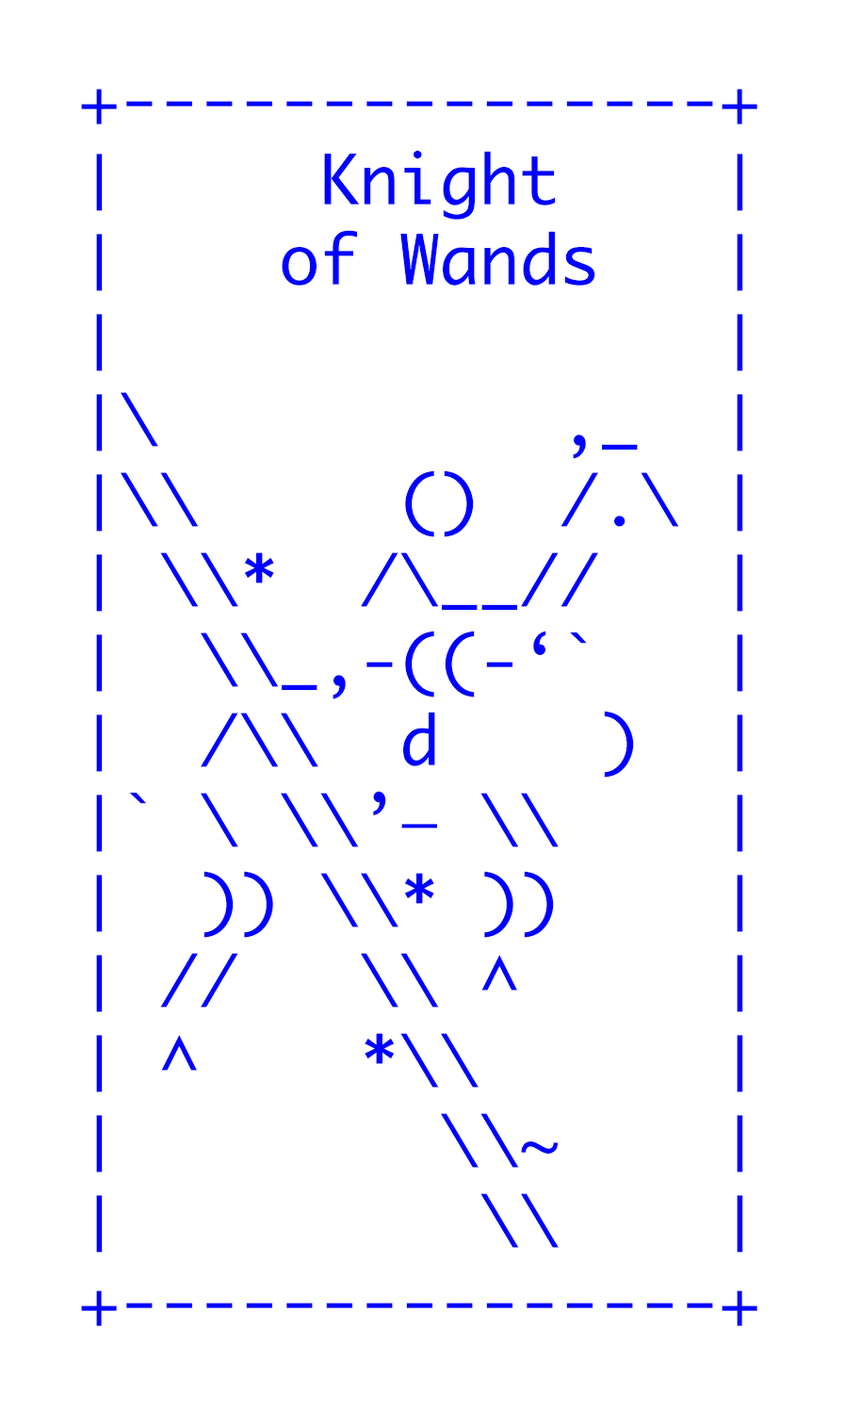
<style>
.page{position:relative;width:845px;height:1411px;background:#ffffff}
.page>*{position:absolute;margin:0}
.t1{font:66.7px "Monaco";color:#0000ff}
</style>
<div class="page">
<p class="t1" style="left:81px;top:89px;width:677px;height:1237px">+---------------+<br>│     Knight    │<br>│    of Wands   │<br>│               │<br>│\          ,_  │<br>│\\     ()  /.\ │<br>│ \\*  /\__//   │<br>│  \\_,-((-‘`   │<br>│  /\\  d    )  │<br>│` \ \\’— \\    │<br>│  )) \\* ))    │      <br>│ //   \\ ^     │<br>│ ^    *\\      │<br>│        \\~    │<br>│         \\    │<br>+---------------+</p>
</div>
